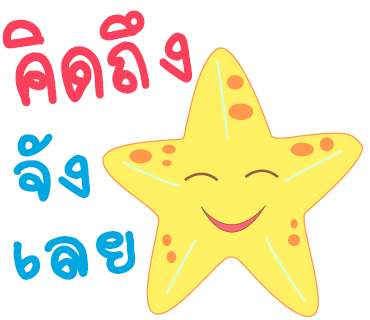
<style>
.page{position:relative;width:370px;height:320px;background:#ffffff}
.page>*{position:absolute;margin:0}
.t1{font:150px "2005_iannnnnMTV";color:#fa405a;scale:0.9 1}
.t2{font:140px "2005_iannnnnMTV";letter-spacing:0.025em;color:#fa405a;scale:0.9 1}
.t3{font:120px "2005_iannnnnMTV";color:#00a8e1;scale:1.06 1}
.t4{font:120px "2005_iannnnnMTV";letter-spacing:0.025em;color:#00a8e1;scale:1.06 1}
</style>
<div class="page">
<p class="t1" style="left:2px;top:10px;width:190px;height:97px;rotate:-8deg">คิด<span class="t2">ถึง</span></p>
<p class="t3" style="left:13px;top:133px;width:77px;height:69px;rotate:-5deg">จัง</p>
<p class="t4" style="left:13px;top:230px;width:123px;height:50px;rotate:-6deg">เลย</p>
</div>
